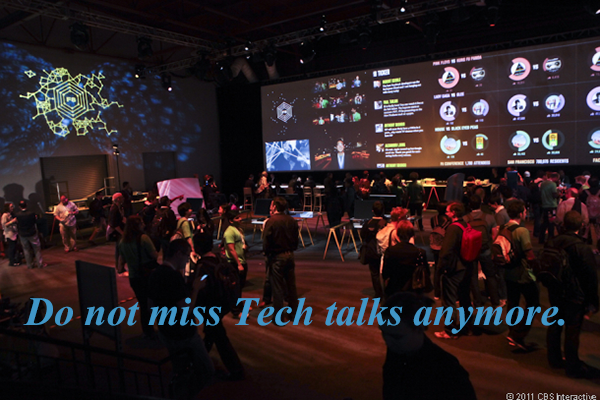
<style>
.page{position:relative;width:600px;height:400px}
.page>*{position:absolute;margin:0}
.t1{font:50px "Vijaya-Bold";color:#4096c7}
</style>
<div class="page">
<p class="t1" style="left:23px;top:297px;width:542px;height:37px">Do not miss Tech talks anymore.</p>
</div>
